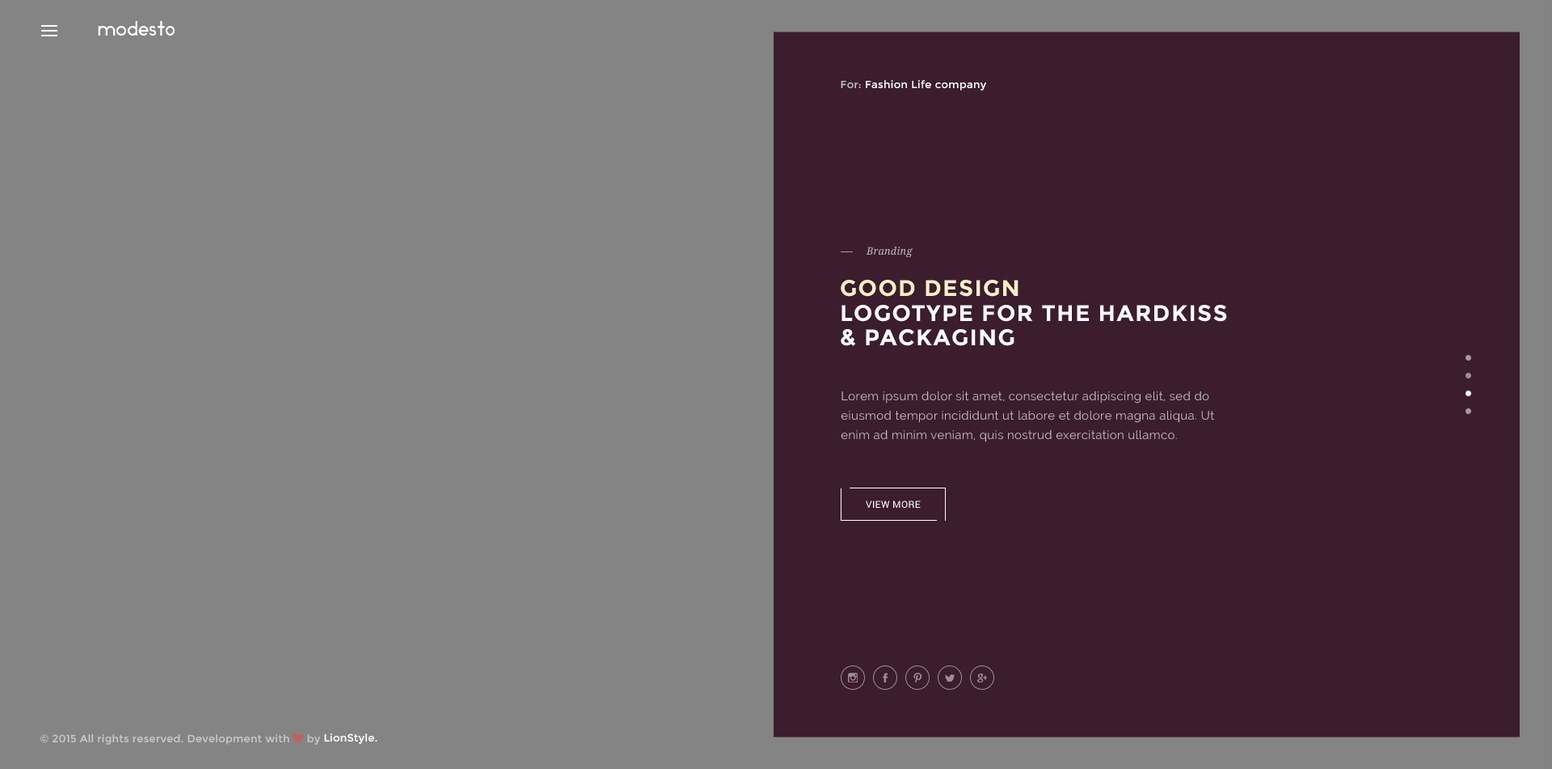
<style>
.page{position:relative;width:1552px;height:769px;background:#848484}
.page>*{position:absolute;margin:0}
.t1{font:19.4px "Ikaros";letter-spacing:0.025em;color:#ffffff}
.t2{font:10.5px "Montserrat-Regular";letter-spacing:0.025em;color:#ffffff}
.t3{font:10.5px "Montserrat-Regular";letter-spacing:0.025em;color:#bfbfbf}
.t4{font:10.5px "DroidSerif-Italic";letter-spacing:0.025em;color:#c5bcc0;scale:0.97 1}
.t5{font:22.6px "Montserrat-Bold";letter-spacing:0.05em;color:#fbefbb;text-transform:uppercase}
.t6{font:22.6px/24.2px "Montserrat-Bold";letter-spacing:0.05em;color:#ffffff;text-transform:uppercase}
.t7{font:12.1px/19.4px "Raleway";letter-spacing:0.025em;color:#c5bcc0}
.t8{font:9.7px "Roboto-Regular";letter-spacing:0.025em;color:#ffffff;text-transform:uppercase}
.t9{font:10.5px "Montserrat-Regular";letter-spacing:0.025em;color:#c8c8c8}
.t10{font:10.5px "FontAwesome";letter-spacing:0.025em;color:#c8c8c8}
</style>
<div class="page">
<p class="t1" style="left:98px;top:21px;width:77px;height:15px">modesto</p>
<p class="t2" style="left:840px;top:80px;width:146px;height:11px"><span class="t3">For:</span> Fashion Life company</p>
<p class="t4" style="left:865px;top:246px;width:47px;height:11px">Branding</p>
<p class="t5" style="left:840px;top:280px;width:178px;height:17px">good design</p>
<p class="t6" style="left:840px;top:305px;width:387px;height:41px">Logotype for the hardkiss<br>&amp; Packaging</p>
<p class="t7" style="left:840px;top:391px;width:375px;height:51px">Lorem ipsum dolor sit amet, consectetur adipiscing elit, sed do eiusmod tempor incididunt ut labore et dolore magna aliqua. Ut enim ad minim veniam, quis nostrud exercitation ullamco.</p>
<p class="t8" style="left:865px;top:500px;width:55px;height:7px">view more</p>
<p class="t9" style="left:40px;top:733px;width:280px;height:11px">© 2015 All rights reserved. Development with <span class="t10">♥</span> by</p>
<p class="t2" style="left:324px;top:733px;width:53px;height:10px">LionStyle.</p>
</div>
